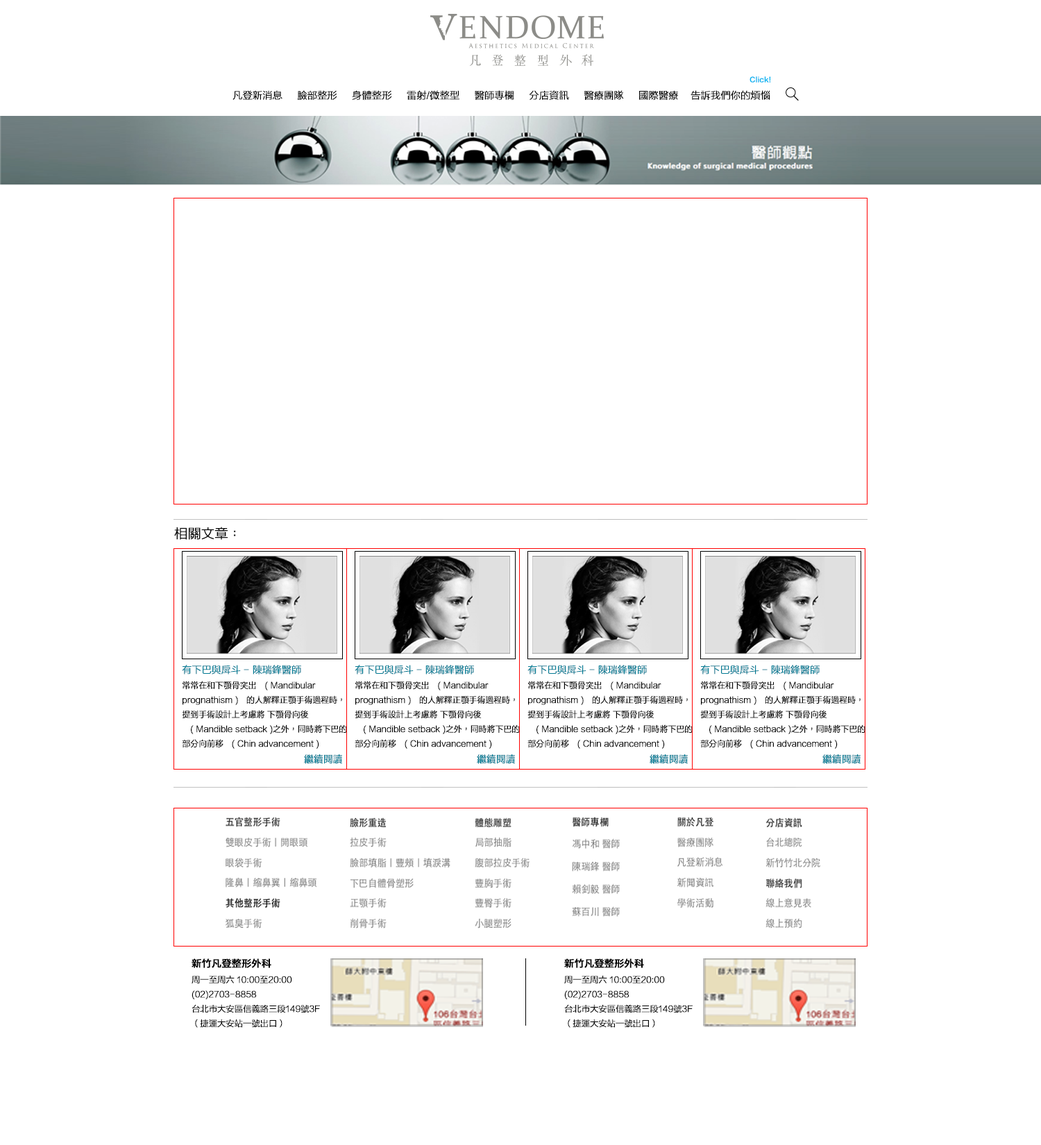
<style>
.page{position:relative;width:1041px;height:1145px;background:#ffffff}
.page>*{position:absolute;margin:0}
.t1{font:6.9px "FZLTZHB--B51-0";color:#00b5f1;font-weight:bold}
.t2{font:9.7px "FZLTXHB--B51-0";color:#000000;font-weight:bold}
.t3{font:13.1px "FZLTXHB--B51-0";color:#000000;font-weight:bold}
.t4{font:9.7px "FZLTXHB--B51-0";color:#007b94;font-weight:bold}
.t5{font:8.3px "FZLTXHB--B51-0";color:#000000;font-weight:bold;scale:0.97 1}
.t6{font:9.7px "FZLTXHB--B51-0";color:#007b94;font-weight:bold;scale:0.96 1}
.t7{font:8.3px "FZLTXHB--B51-0";color:#000000;font-weight:bold}
.t8{font:9.7px "FZLTZHB--B51-0";color:#000000;font-weight:bold}
</style>
<div class="page">
<p class="t1" style="left:750px;top:76px;width:21px;height:7px">Click!</p>
<p class="t2" style="left:233px;top:90px;width:445px;height:10px">凡登新消息     臉部整形     身體整形     雷射/微整型     醫師專欄     分店資訊     醫療團隊     國際醫療</p>
<p class="t2" style="left:691px;top:90px;width:79px;height:10px">告訴我們你的煩惱</p>
<p class="t3" style="left:174px;top:527px;width:62px;height:13px">相關文章：</p>
<p class="t4" style="left:182px;top:665px;width:119px;height:10px">有下巴與戽斗 - 陳瑞鋒醫師</p>
<p class="t4" style="left:355px;top:665px;width:119px;height:10px">有下巴與戽斗 - 陳瑞鋒醫師</p>
<p class="t4" style="left:528px;top:665px;width:119px;height:10px">有下巴與戽斗 - 陳瑞鋒醫師</p>
<p class="t4" style="left:700px;top:665px;width:120px;height:10px">有下巴與戽斗 - 陳瑞鋒醫師</p>
<p class="t5" style="left:182px;top:681px;width:165px;height:68px">常常在和下顎骨突出 ( Mandibular <br>prognathism ) 的人解釋正顎手術過程時，<br>提到手術設計上考慮將 下顎骨向後<br> ( Mandible setback )之外，同時將下巴的<br>部分向前移 ( Chin advancement )</p>
<p class="t5" style="left:355px;top:681px;width:165px;height:68px">常常在和下顎骨突出 ( Mandibular <br>prognathism ) 的人解釋正顎手術過程時，<br>提到手術設計上考慮將 下顎骨向後<br> ( Mandible setback )之外，同時將下巴的<br>部分向前移 ( Chin advancement )</p>
<p class="t5" style="left:528px;top:681px;width:165px;height:68px">常常在和下顎骨突出 ( Mandibular <br>prognathism ) 的人解釋正顎手術過程時，<br>提到手術設計上考慮將 下顎骨向後<br> ( Mandible setback )之外，同時將下巴的<br>部分向前移 ( Chin advancement )</p>
<p class="t5" style="left:700px;top:681px;width:166px;height:68px">常常在和下顎骨突出 ( Mandibular <br>prognathism ) 的人解釋正顎手術過程時，<br>提到手術設計上考慮將 下顎骨向後<br> ( Mandible setback )之外，同時將下巴的<br>部分向前移 ( Chin advancement )</p>
<p class="t6" style="left:304px;top:754px;width:38px;height:10px">繼續閱讀</p>
<p class="t6" style="left:477px;top:754px;width:38px;height:10px">繼續閱讀</p>
<p class="t6" style="left:650px;top:754px;width:38px;height:10px">繼續閱讀</p>
<p class="t6" style="left:823px;top:754px;width:38px;height:10px">繼續閱讀</p>
<p class="t7" style="left:192px;top:959px;width:128px;height:69px"><span class="t8">新竹凡登整形外科<br></span>周一至周六 10:00至20:00<br>(02)2703-8858<br>台北市大安區信義路三段149號3F<br>（捷運大安站一號出口）</p>
<p class="t7" style="left:564px;top:959px;width:129px;height:69px"><span class="t8">新竹凡登整形外科<br></span>周一至周六 10:00至20:00<br>(02)2703-8858<br>台北市大安區信義路三段149號3F<br>（捷運大安站一號出口）</p>
</div>
